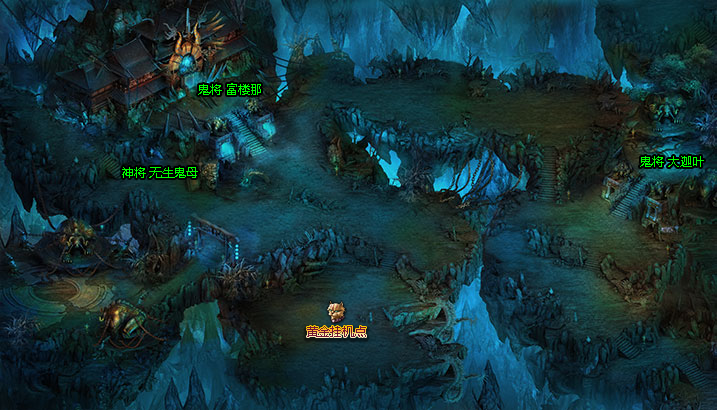
<style>
.page{position:relative;width:717px;height:410px}
.page>*{position:absolute;margin:0}
.t1{font:12px "MicrosoftYaHei";color:#00ff00}
.t2{font:12px "MicrosoftYaHei";color:#701633}
</style>
<div class="page">
<p class="t1" style="left:198px;top:83px;width:63px;height:12px">鬼将 富楼那</p>
<p class="t1" style="left:640px;top:156px;width:64px;height:11px">鬼将 大迦叶</p>
<p class="t1" style="left:122px;top:167px;width:76px;height:11px">神将 无生鬼母</p>
<p class="t2" style="left:307px;top:326px;width:59px;height:11px">黄金挂机点</p>
</div>
